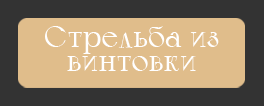
<style>
.page{position:relative;width:264px;height:106px;background:#e0bd8b}
.page>*{position:absolute;margin:0}
.t1{font:30px/24px "Calypso-Regular";color:#ffffff}
</style>
<div class="page">
<p class="t1" style="left:45px;top:26px;width:174px;height:45px;text-align:center">Стрельба из<br>винтовки</p>
</div>
